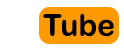
<style>
.page{position:relative;width:124px;height:50px;background:#ffffff}
.page>*{position:absolute;margin:0}
.t1{font:30px "ArialRoundedMTBold";color:#000000}
</style>
<div class="page">
<p class="t1" style="left:43px;top:13px;width:71px;height:24px">Tube</p>
</div>
